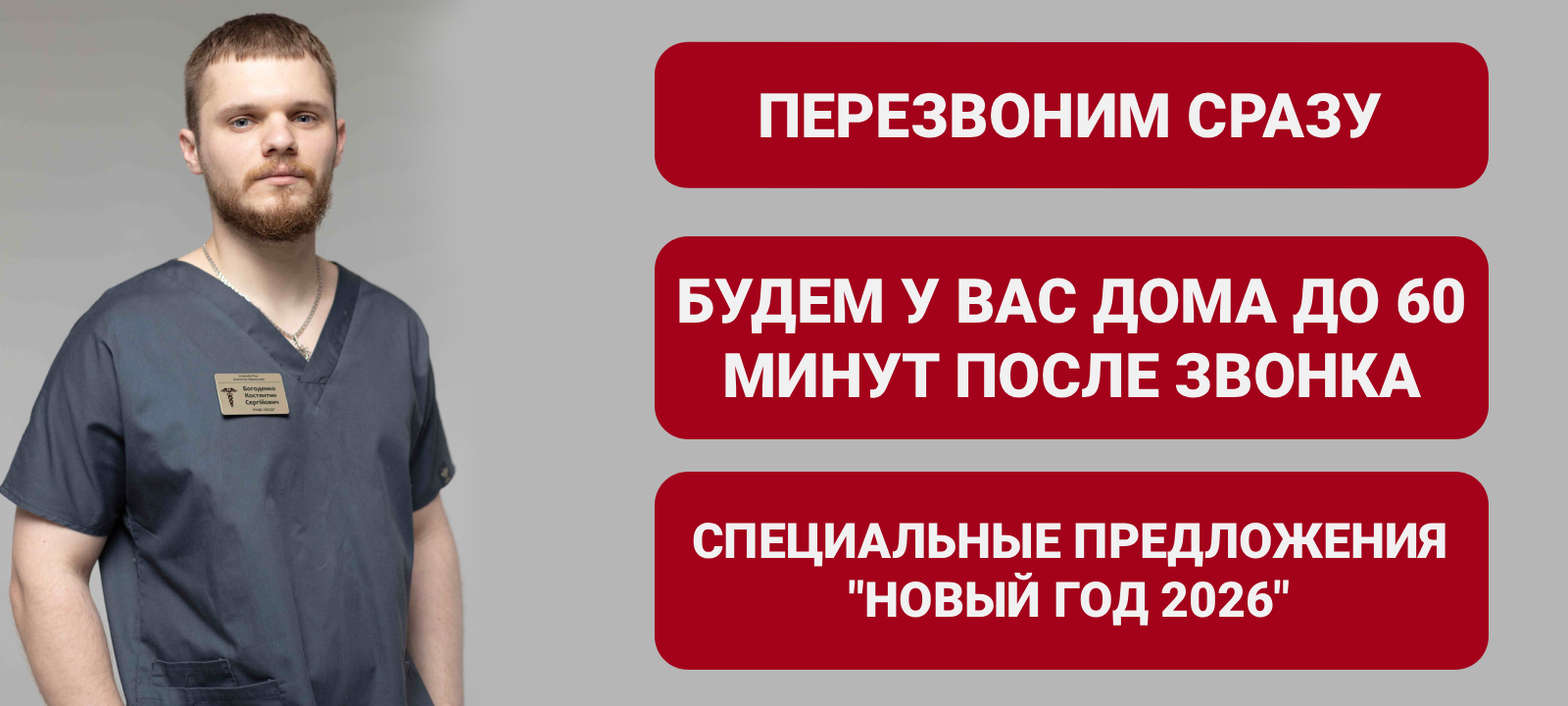
<style>
.page{position:relative;width:1568px;height:706px;background:#a3021a}
.page>*{position:absolute;margin:0}
.t1{font:61.7px "Roboto-Black";color:#f1f1f1}
.t2{font:49px "Roboto-Black";color:#f1f1f1}
</style>
<div class="page">
<p class="t1" style="left:760px;top:92px;width:622px;height:46px">ПЕРЕЗВОНИМ СРАЗУ</p>
<p class="t1" style="left:679px;top:277px;width:785px;height:121px;text-align:center">БУДЕМ У ВАС ДОМА ДО 60 МИНУТ ПОСЛЕ ЗВОНКА</p>
<p class="t2" style="left:693px;top:521px;width:753px;height:104px;text-align:center">СПЕЦИАЛЬНЫЕ ПРЕДЛОЖЕНИЯ "НОВЫЙ ГОД 2026"</p>
</div>
